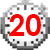
<style>
.page{position:relative;width:50px;height:50px;background:#ffffff}
.page>*{position:absolute;margin:0}
.t1{font:29.8px "CenturyGothic-Bold";color:#ff0000}
</style>
<div class="page">
<p class="t1" style="left:9px;top:14px;width:32px;height:22px">20</p>
</div>
